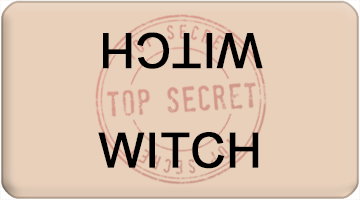
<style>
.page{position:relative;width:360px;height:200px;background:#e8d0bb}
.page>*{position:absolute;margin:0}
.t1{font:48px "ArialMT";color:#000000;font-weight:bold}
</style>
<div class="page">
<p class="t1" style="left:103px;top:32px;width:160px;height:37px;rotate:180deg">WITCH</p>
<p class="t1" style="left:98px;top:132px;width:161px;height:37px">WITCH</p>
</div>
